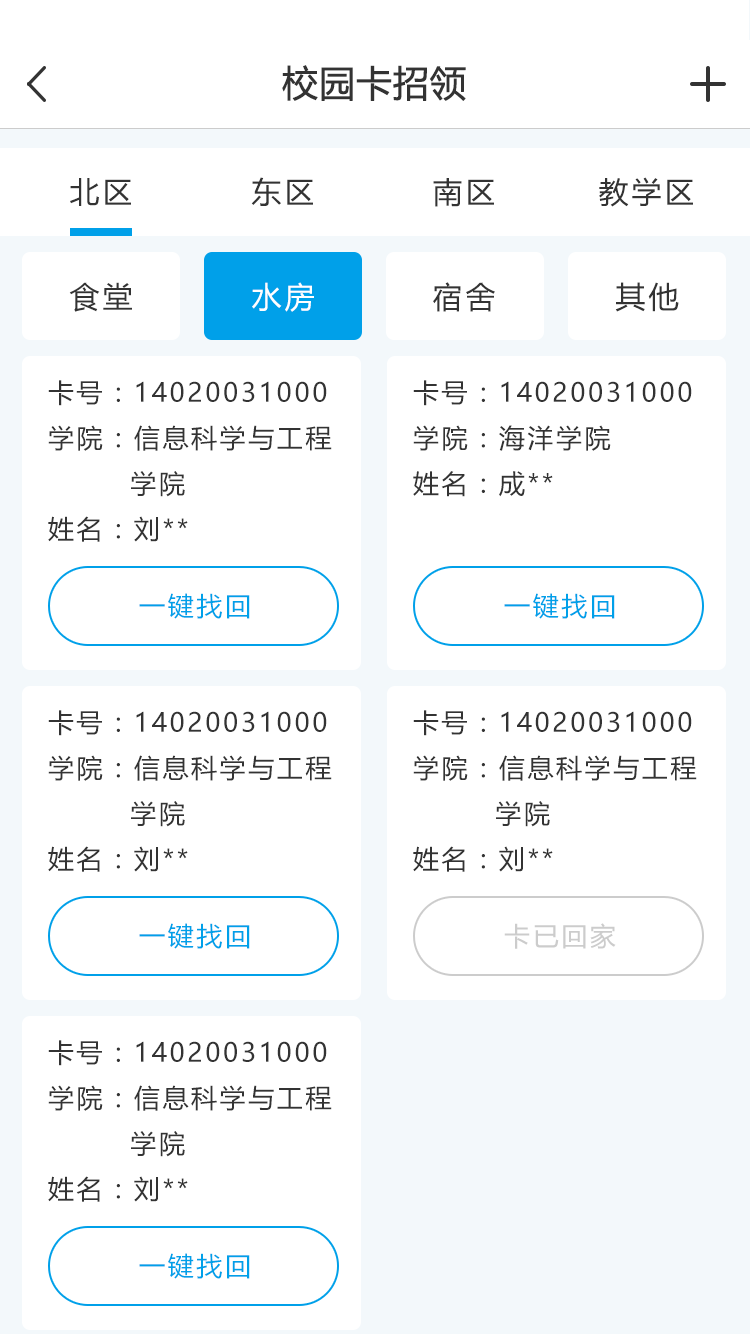
<style>
.page{position:relative;width:750px;height:1334px;background:#ffffff}
.page>*{position:absolute;margin:0}
.t1{font:36px "MicrosoftYaHei";color:#333333;font-weight:bold}
.t2{font:30px "MicrosoftYaHei";letter-spacing:0.1em;color:#333333}
.t3{font:30px "MicrosoftYaHei";letter-spacing:0.1em;color:#ffffff}
.t4{font:26px "MicrosoftYaHei";letter-spacing:0.1em;color:#333333}
.t5{font:26px "MicrosoftYaHei";letter-spacing:0.1em;color:#00a0e9}
.t6{font:26px "MicrosoftYaHei";letter-spacing:0.1em;color:#cccccc}
</style>
<div class="page">
<p class="t1" style="left:282px;top:65px;width:184px;height:36px">校园卡招领</p>
<p class="t2" style="left:70px;top:178px;width:61px;height:28px">北区</p>
<p class="t2" style="left:251px;top:177px;width:62px;height:29px">东区</p>
<p class="t2" style="left:433px;top:178px;width:61px;height:29px">南区</p>
<p class="t2" style="left:599px;top:177px;width:94px;height:30px">教学区</p>
<p class="t2" style="left:69px;top:282px;width:63px;height:30px">食堂</p>
<p class="t3" style="left:252px;top:282px;width:62px;height:30px">水房</p>
<p class="t2" style="left:433px;top:282px;width:62px;height:30px">宿舍</p>
<p class="t2" style="left:615px;top:282px;width:64px;height:30px">其他</p>
<p class="t4" style="left:48px;top:380px;width:284px;height:162px">卡号：14020031000<br>学院：信息科学与工程            学院<br>姓名：刘**</p>
<p class="t4" style="left:413px;top:380px;width:279px;height:117px">卡号：14020031000<br>学院：海洋学院<br>姓名：成**</p>
<p class="t5" style="left:139px;top:593px;width:111px;height:26px">一键找回</p>
<p class="t5" style="left:504px;top:593px;width:111px;height:26px">一键找回</p>
<p class="t4" style="left:48px;top:710px;width:284px;height:162px">卡号：14020031000<br>学院：信息科学与工程            学院<br>姓名：刘**</p>
<p class="t4" style="left:413px;top:710px;width:284px;height:162px">卡号：14020031000<br>学院：信息科学与工程            学院<br>姓名：刘**</p>
<p class="t5" style="left:139px;top:923px;width:111px;height:26px">一键找回</p>
<p class="t6" style="left:504px;top:923px;width:112px;height:26px">卡已回家</p>
<p class="t4" style="left:48px;top:1040px;width:284px;height:162px">卡号：14020031000<br>学院：信息科学与工程            学院<br>姓名：刘**</p>
<p class="t5" style="left:139px;top:1253px;width:111px;height:26px">一键找回</p>
</div>
